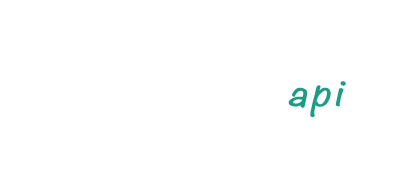
<style>
.page{position:relative;width:394px;height:175px;background:#ffffff}
.page>*{position:absolute;margin:0}
.t1{font:32.3px "Noteworthy-Light";letter-spacing:0.1em;color:#1d9b85;font-weight:bold;font-style:italic;scale:1.24 1}
</style>
<div class="page">
<p class="t1" style="left:288px;top:81px;width:58px;height:37px">api</p>
</div>
